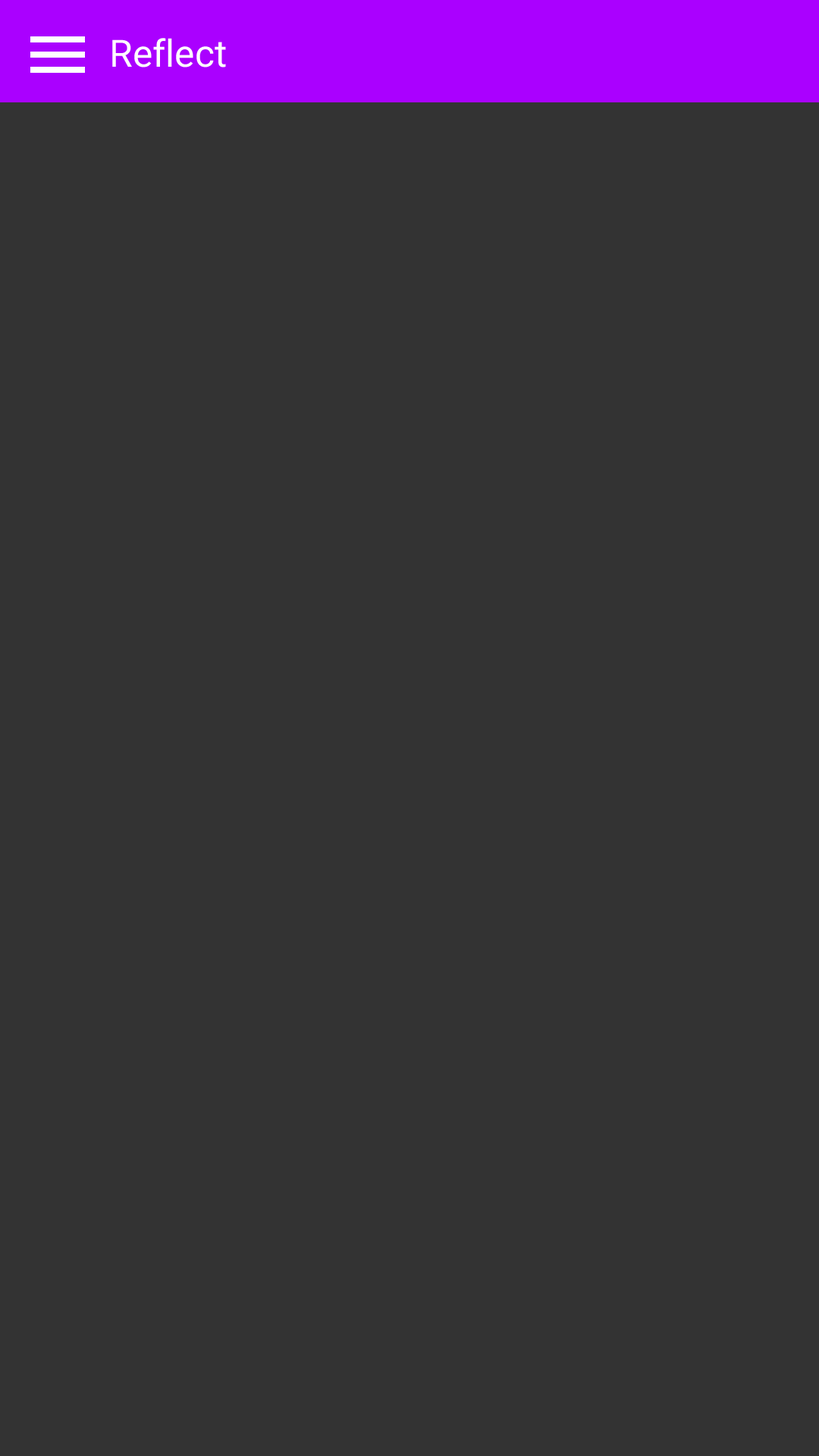
<style>
.page{position:relative;width:819px;height:1456px;background:#333333}
.page>*{position:absolute;margin:0}
.t1{font:37.8px "Roboto-Regular";color:#ffffff}
</style>
<div class="page">
<p class="t1" style="left:112px;top:38px;width:114px;height:29px">Reflect</p>
</div>
